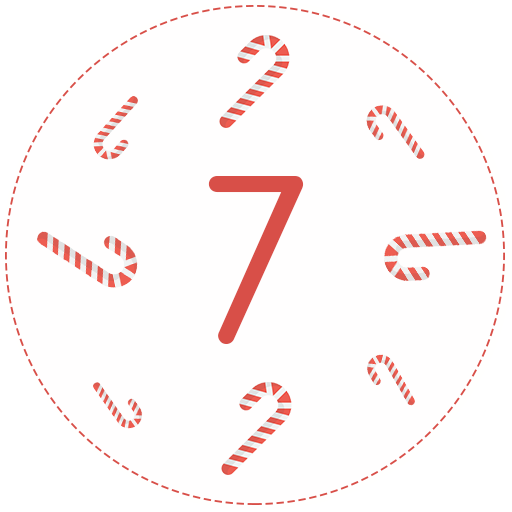
<style>
.page{position:relative;width:512px;height:512px;background:#fffefe}
.page>*{position:absolute;margin:0}
.t1{font:263.1px "Antipasto";color:#d84f48}
</style>
<div class="page">
<p class="t1" style="left:208px;top:176px;width:96px;height:168px">7</p>
</div>
